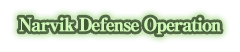
<style>
.page{position:relative;width:240px;height:52px;background:#ffffff}
.page>*{position:absolute;margin:0}
.t1{font:18px "RyuminPro-ExBold";letter-spacing:-0.08em;color:#e1f1c3;font-weight:bold}
</style>
<div class="page">
<p class="t1" style="left:19px;top:17px;width:202px;height:18px">Narvik Defense Operation</p>
</div>
